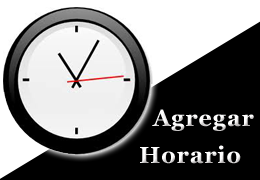
<style>
.page{position:relative;width:260px;height:180px;background:#000000}
.page>*{position:absolute;margin:0}
.t1{font:22.9px/37.5px "Vani-Bold";letter-spacing:0.045em;color:#ffffff}
</style>
<div class="page">
<p class="t1" style="left:140px;top:109px;width:114px;height:55px">Agregar <br>   Horario</p>
</div>
